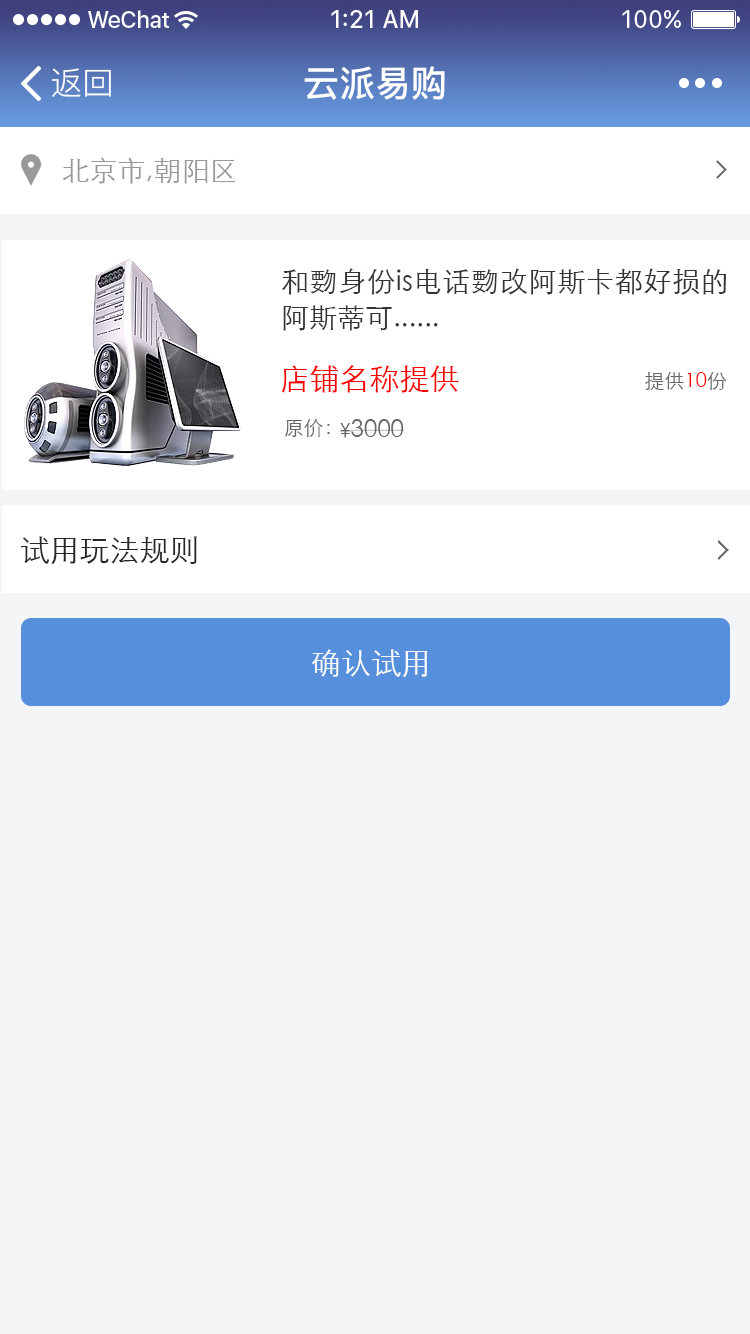
<style>
.page{position:relative;width:750px;height:1334px;background:#f4f5f6}
.page>*{position:absolute;margin:0}
.t1{font:32px "PingFang-SC-Regular";color:#ffffff}
.t2{font:36px "PingFang-SC-Bold";color:#ffffff}
.t3{font:28px "STXihei";color:#999999}
.t4{font:28px/36px "STXihei";color:#333333}
.t5{font:30px "STXihei";color:#ff0000}
.t6{font:20px "STXihei";color:#666666}
.t7{font:20px "STXihei";color:#ff0000}
.t8{font:24px "STXihei";color:#666666}
.t9{font:30px "STXihei";color:#262626}
.t10{font:30px "STXihei";color:#ffffff}
</style>
<div class="page">
<p class="t1" style="left:52px;top:68px;width:59px;height:29px">返回</p>
<p class="t2" style="left:304px;top:66px;width:141px;height:34px">云派易购</p>
<p class="t3" style="left:62px;top:157px;width:173px;height:27px">北京市,朝阳区</p>
<p class="t4" style="left:282px;top:268px;width:445px;height:63px;text-align:justify">和覅身份is电话覅改阿斯卡都好损的阿斯蒂可......</p>
<p class="t5" style="left:281px;top:365px;width:178px;height:28px">店铺名称提供</p>
<p class="t6" style="left:645px;top:372px;width:82px;height:19px">提供<span class="t7">10</span>份</p>
<p class="t6" style="left:284px;top:419px;width:46px;height:19px">原价：</p>
<p class="t8" style="left:339px;top:419px;width:65px;height:19px"><span class="t6">¥</span>3000</p>
<p class="t9" style="left:21px;top:536px;width:176px;height:28px">试用玩法规则</p>
<p class="t10" style="left:311px;top:649px;width:117px;height:28px">确认试用</p>
</div>
